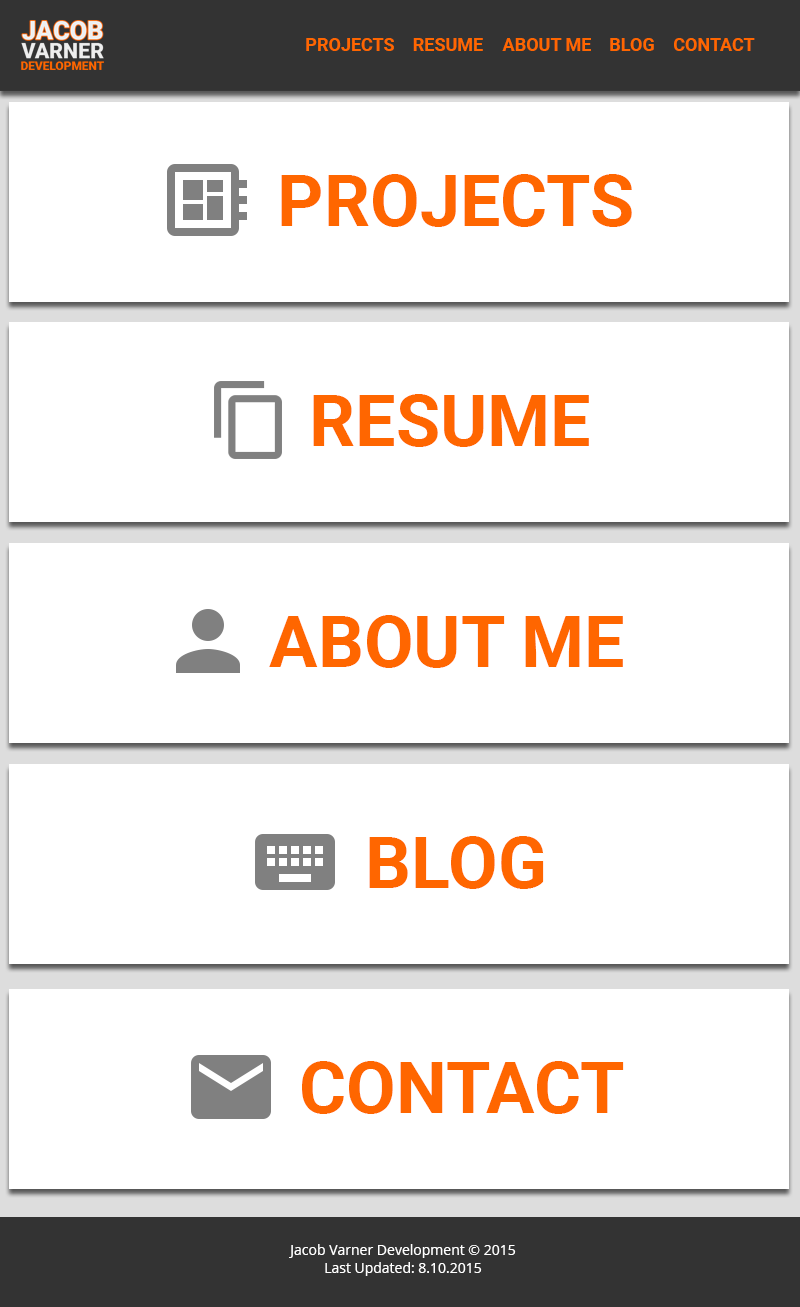
<style>
.page{position:relative;width:800px;height:1307px;background:#ffffff}
.page>*{position:absolute;margin:0}
.t1{font:18px "Roboto-Bold";color:#ff6600}
.t2{font:72px "Roboto-Bold";color:#ff6600}
.t3{font:14px/18px "OpenSans";color:#ffffff}
</style>
<div class="page">
<p class="t1" style="left:306px;top:38px;width:88px;height:13px">PROJECTS</p>
<p class="t1" style="left:413px;top:38px;width:70px;height:13px">RESUME</p>
<p class="t1" style="left:502px;top:38px;width:89px;height:13px">ABOUT ME</p>
<p class="t1" style="left:610px;top:38px;width:44px;height:13px">BLOG</p>
<p class="t1" style="left:674px;top:38px;width:81px;height:13px">CONTACT</p>
<p class="t2" style="left:281px;top:174px;width:351px;height:53px">PROJECTS</p>
<p class="t2" style="left:313px;top:394px;width:276px;height:53px">RESUME</p>
<p class="t2" style="left:269px;top:615px;width:354px;height:53px">ABOUT ME</p>
<p class="t2" style="left:369px;top:836px;width:175px;height:53px">BLOG</p>
<p class="t2" style="left:302px;top:1061px;width:322px;height:53px">CONTACT</p>
<p class="t3" style="left:289px;top:1244px;width:227px;height:32px;text-align:center">Jacob Varner Development © 2015<br>Last Updated: 8.10.2015</p>
</div>
